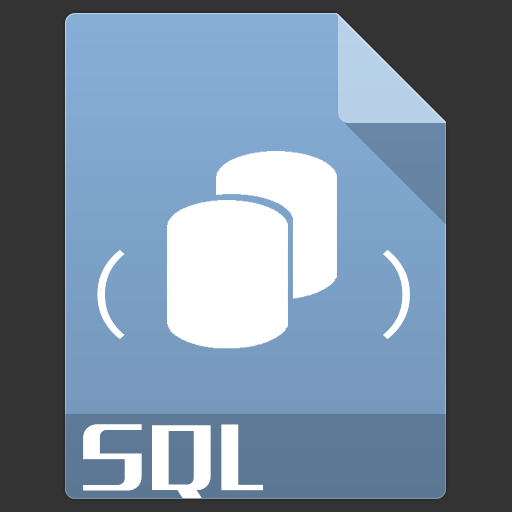
<style>
.page{position:relative;width:512px;height:512px;background:#333333}
.page>*{position:absolute;margin:0}
.t1{font:72px "MFLiHei_Noncommercial-Regular";letter-spacing:0.07em;color:#ffffff}
</style>
<div class="page">
<p class="t1" style="left:83px;top:424px;width:180px;height:75px">SQL</p>
</div>
